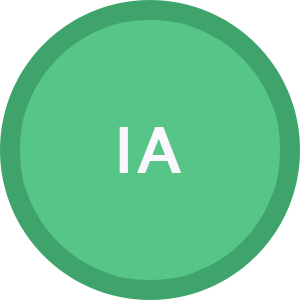
<style>
.page{position:relative;width:300px;height:300px;background:#57c488}
.page>*{position:absolute;margin:0}
.t1{font:62.5px "LucidaSansUnicode";letter-spacing:0.04em;color:#faf8fe;font-weight:bold}
</style>
<div class="page">
<p class="t1" style="left:119px;top:127px;width:62px;height:46px">IA</p>
</div>
